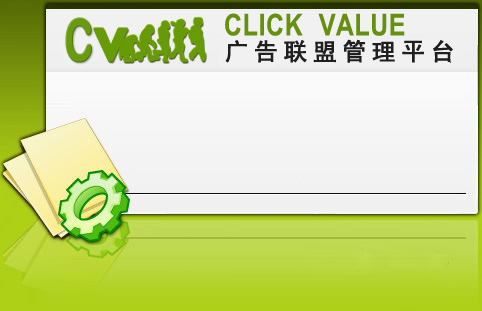
<style>
.page{position:relative;width:482px;height:311px}
.page>*{position:absolute;margin:0}
.t1{font:82.5px "ArialRoundedMTBold";color:#689b10;font-weight:bold;scale:0.63 1}
.t2{font:30px "ArialNarrow-Bold";color:#689010;font-weight:bold}
.t3{font:24px "SimHei";letter-spacing:0.2em;color:#1f1f1f;font-weight:bold}
</style>
<div class="page">
<p class="t1" style="left:65px;top:17px;width:27px;height:46px">c</p>
<p class="t2" style="left:225px;top:13px;width:180px;height:23px">CLICK  VALUE</p>
<p class="t3" style="left:225px;top:39px;width:228px;height:24px">广告联盟管理平台</p>
</div>
